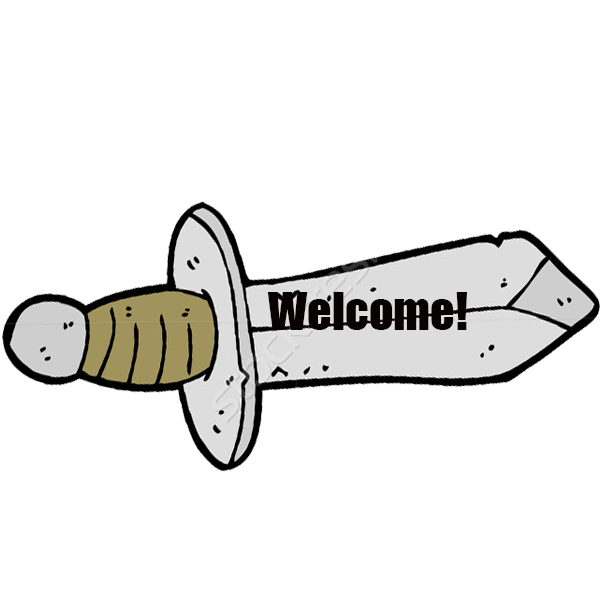
<style>
.page{position:relative;width:600px;height:600px;background:#ffffff}
.page>*{position:absolute;margin:0}
.t1{font:48px "Impact";color:#090202}
</style>
<div class="page">
<p class="t1" style="left:267px;top:292px;width:201px;height:38px">Welcome!</p>
</div>
